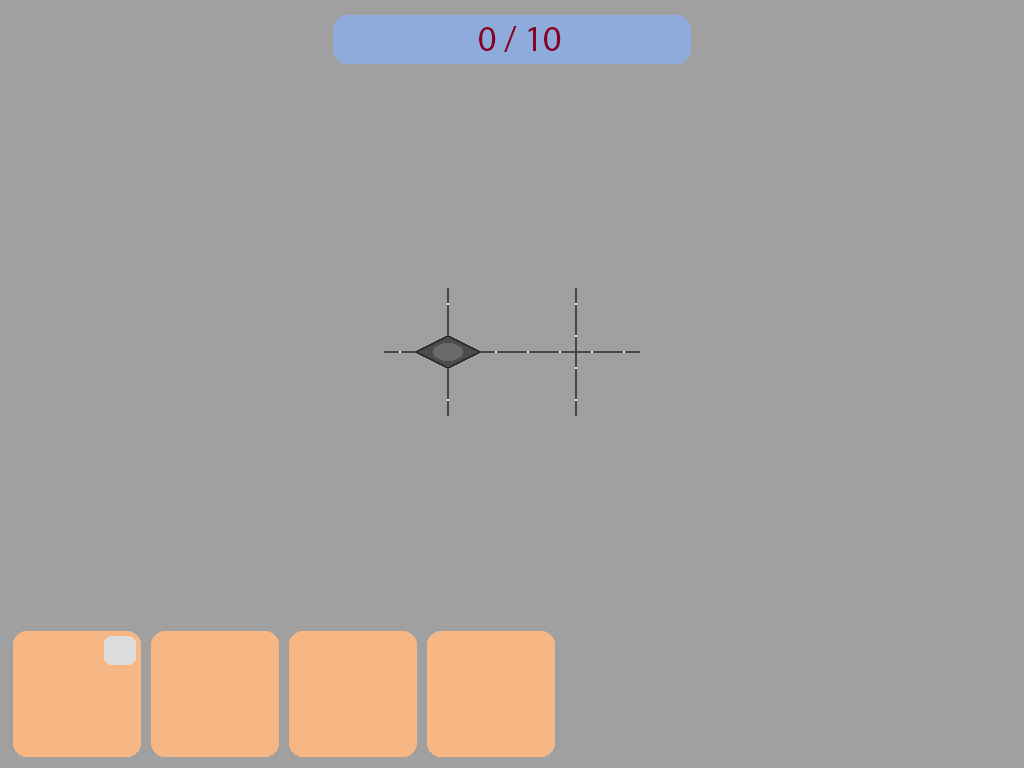
<style>
.page{position:relative;width:1024px;height:768px;background:#a0a0a0}
.page>*{position:absolute;margin:0}
.t1{font:36px "MyriadPro-Regular";color:#870027}
</style>
<div class="page">
<p class="t1" style="left:479px;top:26px;width:82px;height:26px">0 / 10</p>
</div>
